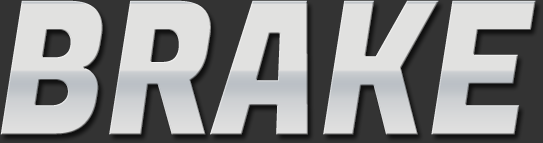
<style>
.page{position:relative;width:543px;height:143px;background:#333333}
.page>*{position:absolute;margin:0}
.t1{font:185.2px "FugazOne-Regular";color:#dfdfdf;scale:0.89 1}
</style>
<div class="page">
<p class="t1" style="left:0px;top:0px;width:536px;height:135px">BRAKE</p>
</div>
